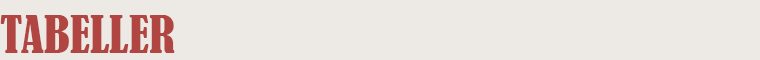
<style>
.page{position:relative;width:760px;height:60px;background:#edeae5}
.page>*{position:absolute;margin:0}
.t1{font:48px "BernardMT-Condensed";color:#b14542}
</style>
<div class="page">
<p class="t1" style="left:0px;top:15px;width:175px;height:38px">TABELLER</p>
</div>
